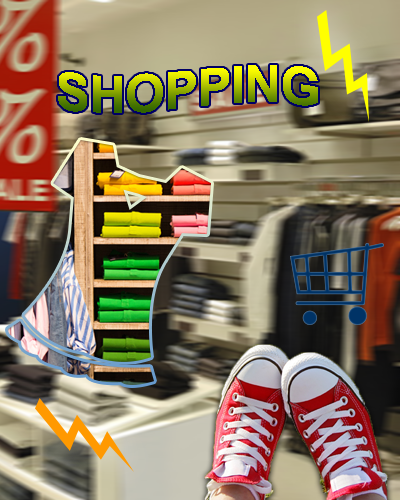
<style>
.page{position:relative;width:400px;height:500px}
.page>*{position:absolute;margin:0}
.t1{font:50px "Arial-BoldMT"}
</style>
<div class="page">
<p class="t1" style="left:58px;top:65px;width:260px;height:48px">SHOPPING</p>
</div>
